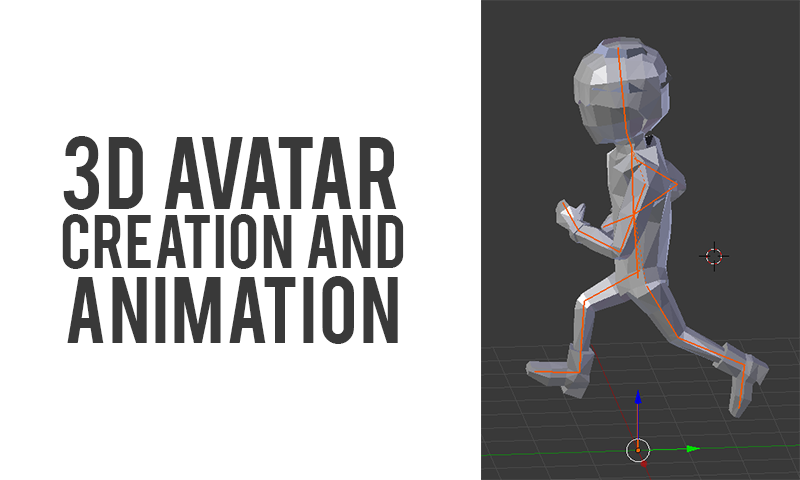
<style>
.page{position:relative;width:800px;height:480px;background:#ffffff}
.page>*{position:absolute;margin:0}
.t1{font:59.6px/59.6px "Bebas";color:#393939}
.t2{font:80.8px/68.1px "Bebas";color:#393939}
.t3{font:74.5px/74.5px "Bebas";color:#393939}
</style>
<div class="page">
<p class="t1" style="left:62px;top:136px;width:342px;height:208px;text-align:center"><span class="t2">3D  Avatar <br></span>Creation  and<br><span class="t3">Animation</span></p>
</div>
